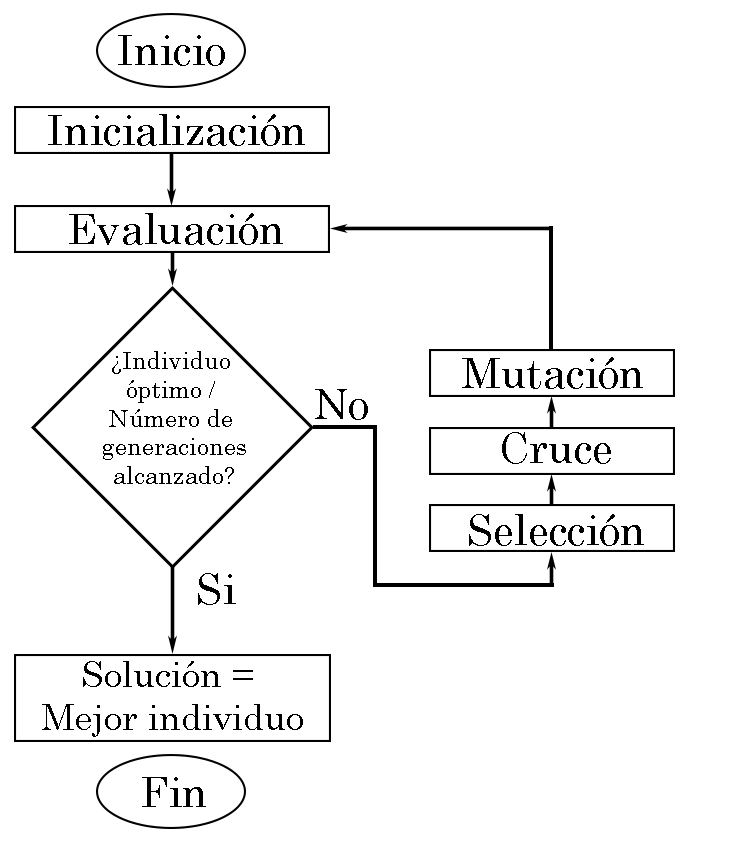
<style>
.page{position:relative;width:752px;height:841px;background:#ffffff}
.page>*{position:absolute;margin:0}
.t1{font:42px "Century";color:#000000}
.t2{font:24px "Century";color:#000000}
.t3{font:36px "Century";color:#000000}
</style>
<div class="page">
<p class="t1" style="left:118px;top:35px;width:107px;height:31px">Inicio</p>
<p class="t1" style="left:48px;top:114px;width:257px;height:32px">Inicialización</p>
<p class="t1" style="left:69px;top:213px;width:214px;height:32px">Evaluación</p>
<p class="t2" style="left:103px;top:351px;width:143px;height:133px;text-align:center">¿Individuo <br>óptimo / <br>Número de <br>generaciones<br>alcanzado?</p>
<p class="t1" style="left:462px;top:357px;width:181px;height:32px">Mutación</p>
<p class="t1" style="left:315px;top:389px;width:53px;height:31px">No</p>
<p class="t1" style="left:502px;top:432px;width:109px;height:32px">Cruce</p>
<p class="t1" style="left:469px;top:514px;width:175px;height:32px">Selección</p>
<p class="t1" style="left:198px;top:573px;width:38px;height:32px">Si</p>
<p class="t3" style="left:42px;top:661px;width:261px;height:76px;text-align:center">Solución = <br>Mejor individuo</p>
<p class="t1" style="left:142px;top:777px;width:64px;height:30px">Fin</p>
</div>
